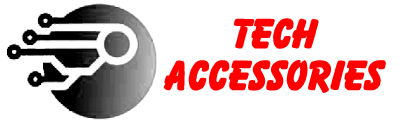
<style>
.page{position:relative;width:400px;height:125px;background:#ffffff}
.page>*{position:absolute;margin:0}
.t1{font:34.8px "VNI-Bazooka-Regular";color:#ff0000}
</style>
<div class="page">
<p class="t1" style="left:163px;top:18px;width:223px;height:75px;text-align:center">Tech<br>Accessories</p>
</div>
